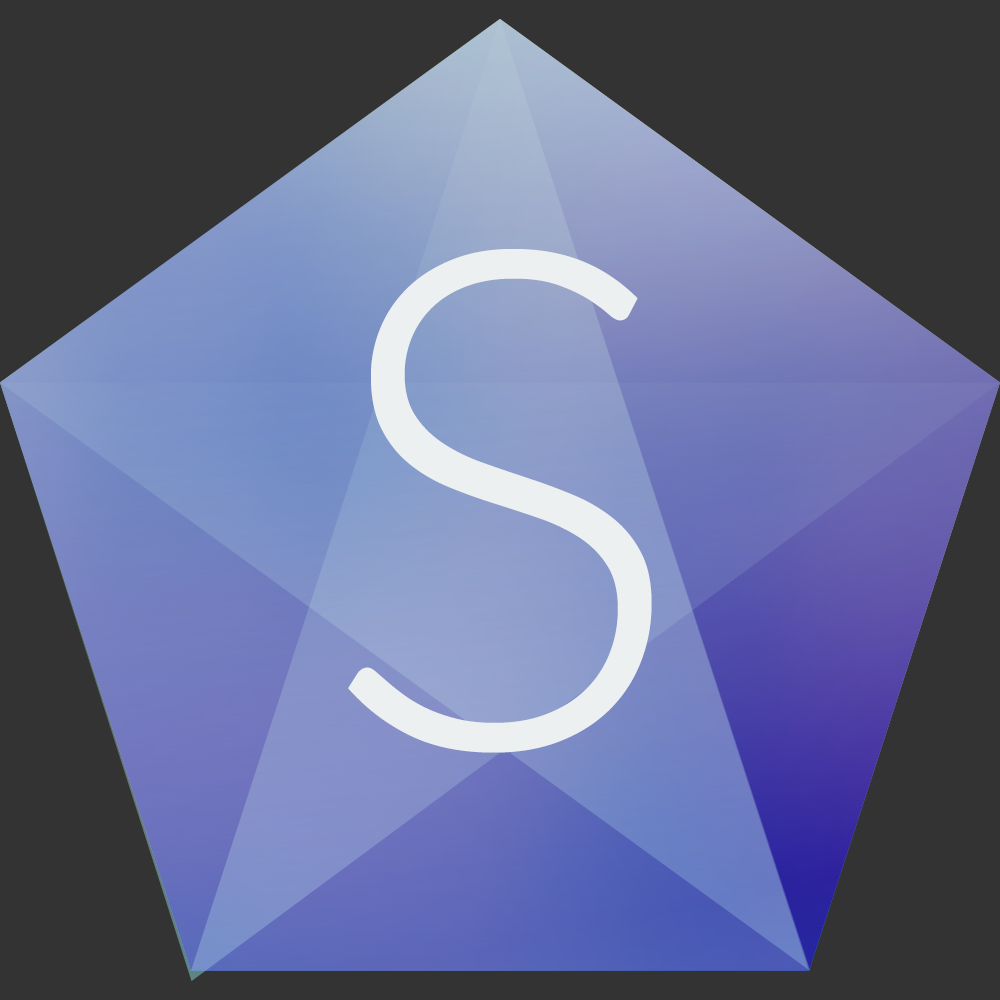
<style>
.page{position:relative;width:1000px;height:1000px;background:#333333}
.page>*{position:absolute;margin:0}
.t1{font:696.1px "Lato-Light";letter-spacing:0.04em;color:#ecf0f1}
</style>
<div class="page">
<p class="t1" style="left:348px;top:249px;width:304px;height:504px">S</p>
</div>
